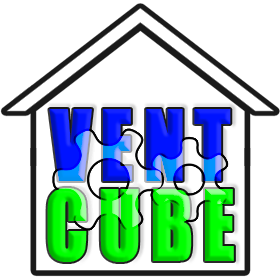
<style>
.page{position:relative;width:280px;height:280px;background:#ffffff}
.page>*{position:absolute;margin:0}
.t1{font:90.2px/80px "Impact";letter-spacing:0.12em;font-weight:bold;scale:0.83 1}
</style>
<div class="page">
<p class="t1" style="left:47px;top:109px;width:187px;height:153px;text-align:center">VENT<br>CUBE</p>
</div>
